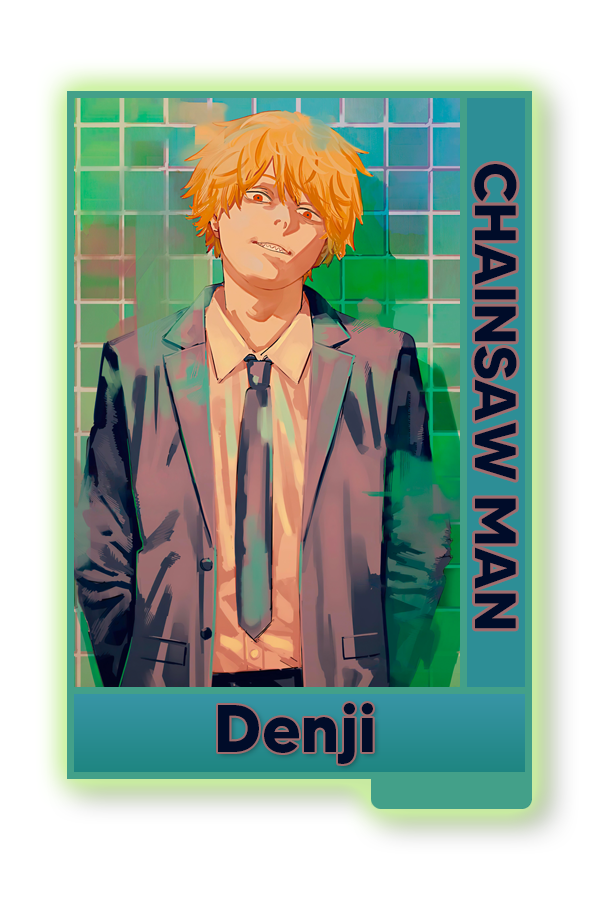
<style>
.page{position:relative;width:600px;height:900px;background:#ffffff}
.page>*{position:absolute;margin:0}
.t1{font:58.3px "MADETOMMY-Bold";color:#000c29}
.t2{font:66.7px "MADETOMMY-Bold";color:#000c29}
</style>
<div class="page">
<p class="t1" style="left:474px;top:164px;width:43px;height:465px;rotate:90deg">CHAINSAW MAN</p>
<p class="t2" style="left:218px;top:703px;width:155px;height:61px">Denji</p>
</div>
